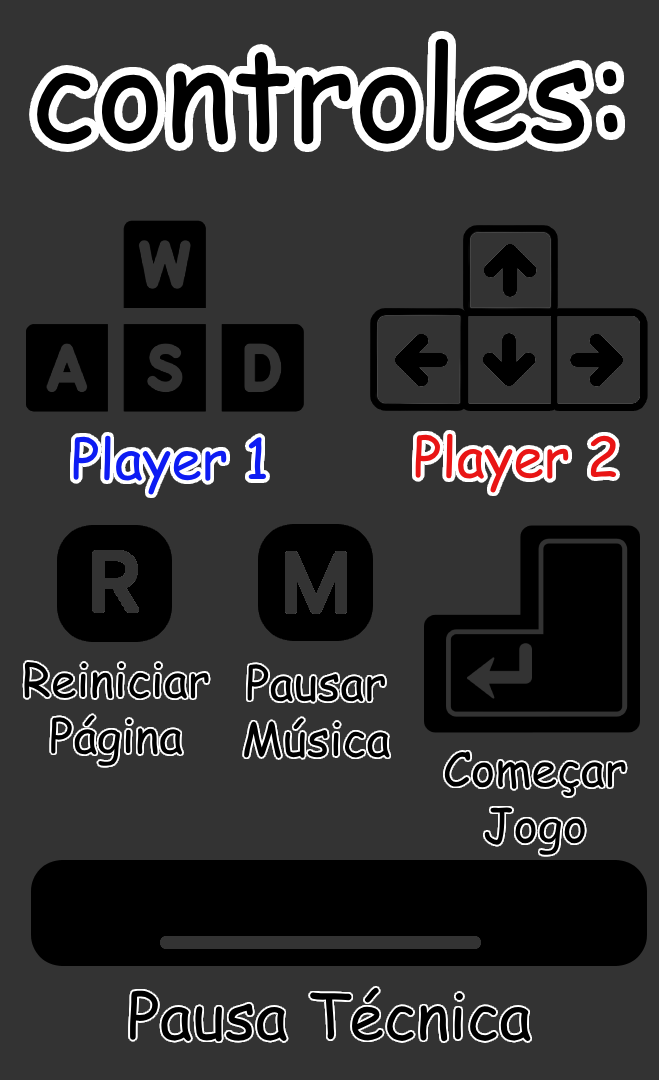
<style>
.page{position:relative;width:659px;height:1080px;background:#333333}
.page>*{position:absolute;margin:0}
.t1{font:129px "ComicSansMS";color:#000000}
.t2{font:55px "ComicSansMS";color:#0d1cf3}
.t3{font:55px "ComicSansMS";color:#e91515}
.t4{font:46.5px "ComicSansMS";color:#ffffff}
.t5{font:46.5px "ComicSansMS";color:#000000}
.t6{font:63px "ComicSansMS";color:#000000}
</style>
<div class="page">
<p class="t1" style="left:37px;top:38px;width:581px;height:107px">controles:</p>
<p class="t2" style="left:73px;top:435px;width:193px;height:60px">Player 1</p>
<p class="t3" style="left:415px;top:433px;width:202px;height:60px">Player 2</p>
<p class="t4" style="left:24px;top:662px;width:185px;height:104px;text-align:center"><span class="t5">R</span>einiciar<br>Página</p>
<p class="t5" style="left:244px;top:664px;width:146px;height:94px;text-align:center">Pausar<br>Música</p>
<p class="t4" style="left:444px;top:751px;width:182px;height:104px;text-align:center"><span class="t5">C</span>omeçar<br>Jogo</p>
<p class="t6" style="left:130px;top:987px;width:401px;height:55px">Pausa Técnica</p>
</div>
